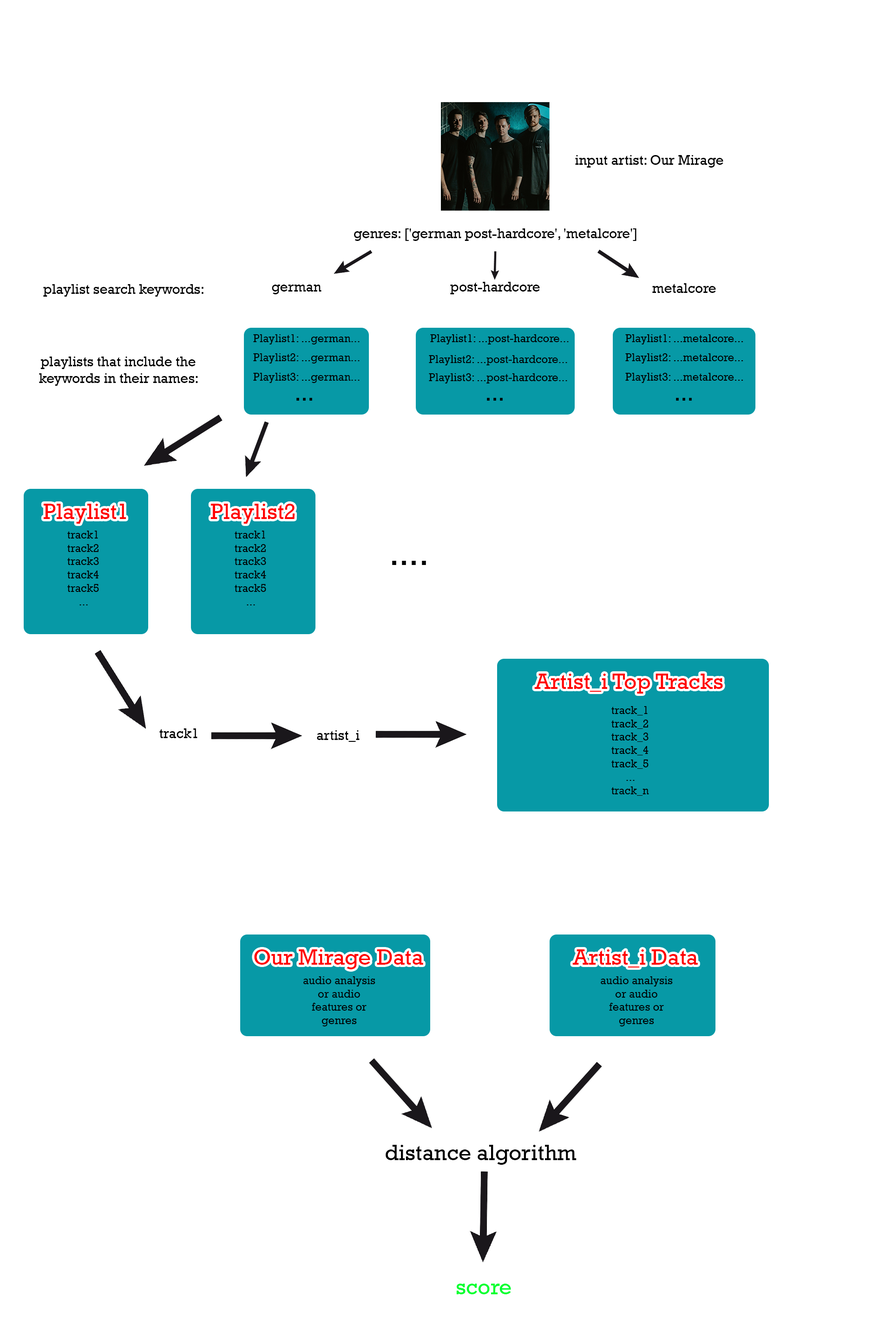
<style>
.page{position:relative;width:892px;height:1337px;background:#ffffff}
.page>*{position:absolute;margin:0}
.t1{font:13.9px "Rockwell";color:#000000}
.t2{font:11.1px "Rockwell";color:#000000}
.t3{font:22.3px "Rockwell";color:#000000}
.t4{font:22.3px "Rockwell";color:#ff0000}
.t5{font:33.4px "Rockwell";color:#000000}
.t6{font:22.3px "Rockwell";color:#00ff30}
</style>
<div class="page">
<p class="t1" style="left:575px;top:155px;width:148px;height:13px">input artist: Our Mirage</p>
<p class="t1" style="left:354px;top:228px;width:282px;height:13px">genres: ['german post-hardcore', 'metalcore']</p>
<p class="t1" style="left:450px;top:282px;width:90px;height:12px">post-hardcore</p>
<p class="t1" style="left:43px;top:284px;width:160px;height:13px">playlist search keywords:</p>
<p class="t1" style="left:272px;top:285px;width:49px;height:9px">german</p>
<p class="t1" style="left:652px;top:283px;width:64px;height:10px">metalcore</p>
<p class="t2" style="left:253px;top:334px;width:106px;height:11px">Playlist1: ...german...</p>
<p class="t2" style="left:430px;top:334px;width:138px;height:11px">Playlist1: ...post-hardcore...</p>
<p class="t2" style="left:625px;top:334px;width:118px;height:11px">Playlist1: ...metalcore...</p>
<p class="t2" style="left:253px;top:353px;width:106px;height:11px">Playlist2: ...german...</p>
<p class="t2" style="left:625px;top:353px;width:118px;height:11px">Playlist2: ...metalcore...</p>
<p class="t1" style="left:39px;top:357px;width:159px;height:29px;text-align:center">playlists that include the keywords in their names:</p>
<p class="t2" style="left:429px;top:355px;width:138px;height:10px">Playlist2: ...post-hardcore...</p>
<p class="t2" style="left:253px;top:373px;width:106px;height:10px">Playlist3: ...german...</p>
<p class="t2" style="left:429px;top:373px;width:138px;height:11px">Playlist3: ...post-hardcore...</p>
<p class="t2" style="left:625px;top:373px;width:118px;height:10px">Playlist3: ...metalcore...</p>
<p class="t3" style="left:296px;top:398px;width:16px;height:3px">...</p>
<p class="t3" style="left:487px;top:398px;width:15px;height:3px">...</p>
<p class="t3" style="left:676px;top:398px;width:15px;height:3px">...</p>
<p class="t4" style="left:43px;top:504px;width:83px;height:20px">Playlist1</p>
<p class="t4" style="left:210px;top:504px;width:84px;height:20px">Playlist2</p>
<p class="t2" style="left:67px;top:531px;width:32px;height:75px;text-align:center">track1<br>track2<br>track3<br>track4<br>track5<br>...</p>
<p class="t2" style="left:235px;top:531px;width:31px;height:75px;text-align:center">track1<br>track2<br>track3<br>track4<br>track5<br>...</p>
<p class="t5" style="left:392px;top:561px;width:34px;height:4px">....</p>
<p class="t4" style="left:534px;top:674px;width:189px;height:20px">Artist_i Top Tracks</p>
<p class="t2" style="left:611px;top:706px;width:38px;height:90px;text-align:center">track_1<br>track_2<br>track_3<br>track_4<br>track_5<br>...<br>track_n</p>
<p class="t1" style="left:159px;top:729px;width:38px;height:9px">track1</p>
<p class="t1" style="left:317px;top:730px;width:42px;height:12px">artist_i</p>
<p class="t4" style="left:254px;top:950px;width:169px;height:20px">Our Mirage Data</p>
<p class="t4" style="left:572px;top:950px;width:125px;height:18px">Artist_i Data</p>
<p class="t2" style="left:303px;top:977px;width:72px;height:50px;text-align:center">audio analysis or audio features or genres</p>
<p class="t2" style="left:600px;top:977px;width:72px;height:50px;text-align:center">audio analysis or audio features or genres</p>
<p class="t3" style="left:385px;top:1145px;width:191px;height:20px">distance algorithm</p>
<p class="t6" style="left:456px;top:1284px;width:55px;height:11px">score</p>
</div>
